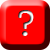
<style>
.page{position:relative;width:50px;height:50px;background:#ff0000}
.page>*{position:absolute;margin:0}
.t1{font:36.6px "Gungsuh"}
</style>
<div class="page">
<p class="t1" style="left:18px;top:10px;width:16px;height:26px">?</p>
</div>
